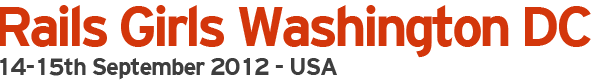
<style>
.page{position:relative;width:612px;height:82px;background:#ffffff}
.page>*{position:absolute;margin:0}
.t1{font:24px "Interstate-Bold";letter-spacing:-0.05em;color:#3e3e3e}
.t2{font:56px "Interstate-Bold";letter-spacing:-0.07em;color:#d3360b}
</style>
<div class="page">
<p class="t1" style="left:0px;top:5px;width:591px;height:75px"><span class="t2">Rails Girls Washington DC<br></span>14-15th September 2012 - USA</p>
</div>
